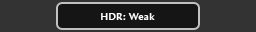
<style>
.page{position:relative;width:256px;height:32px;background:#333333}
.page>*{position:absolute;margin:0}
.t1{font:10px "AmiraParadiso";letter-spacing:0.05em;color:#ffffff}
</style>
<div class="page">
<p class="t1" style="left:101px;top:13px;width:54px;height:7px">HDR: Weak</p>
</div>
